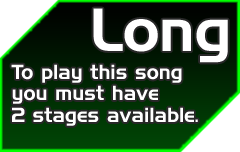
<style>
.page{position:relative;width:240px;height:152px}
.page>*{position:absolute;margin:0}
.t1{font:59.3px "HandelGothicBT-Regular";color:#ffffff}
.t2{font:19.8px/21.7px "HandelGothicBT-Regular";color:#ffffff}
</style>
<div class="page">
<p class="t1" style="left:93px;top:8px;width:135px;height:55px">Long</p>
<p class="t2" style="left:11px;top:64px;width:187px;height:62px">To play this song<br>you must have<br>2 stages available.</p>
</div>
